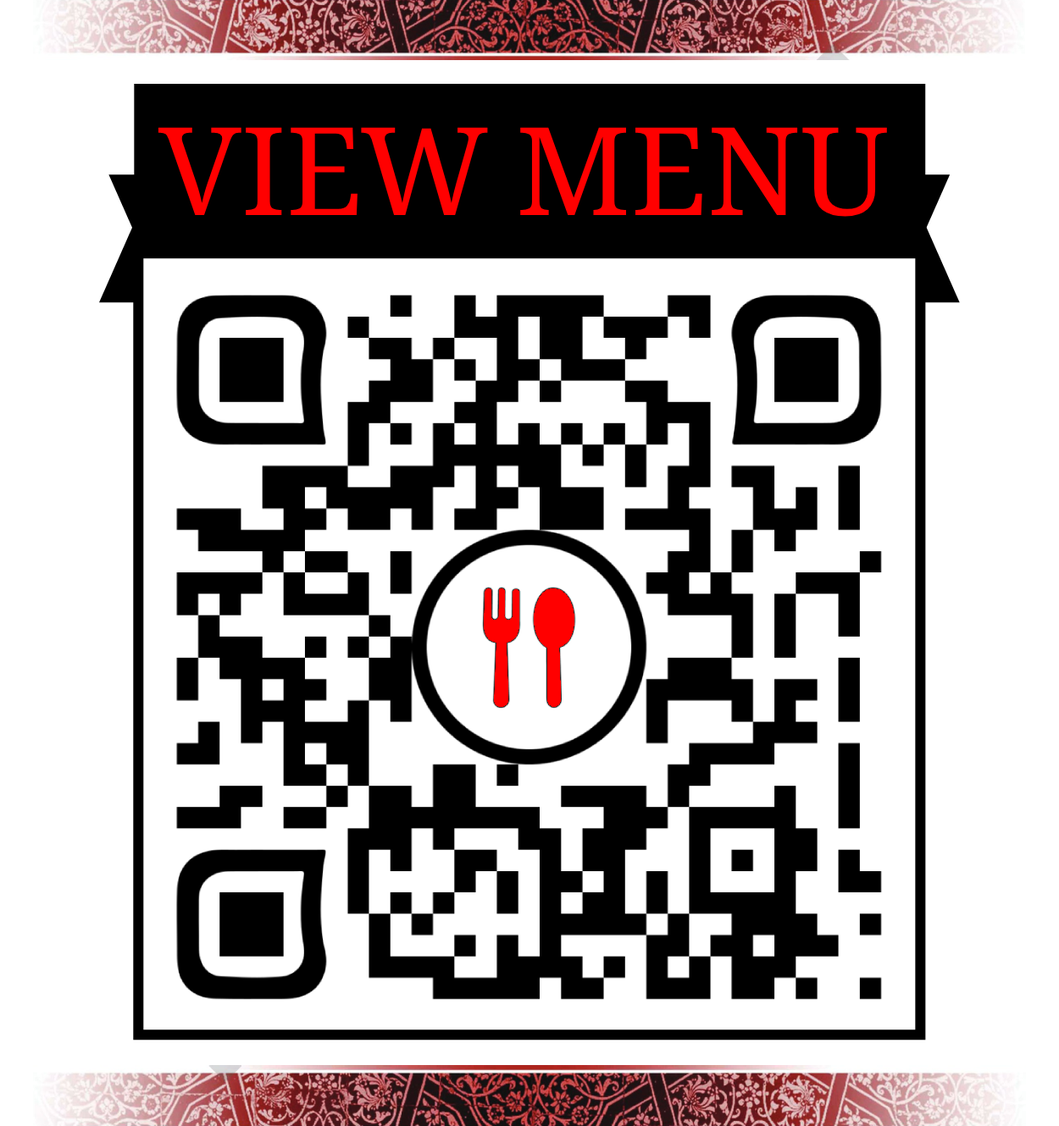
<style>
.page{position:relative;width:1059px;height:1126px;background:#ffffff}
.page>*{position:absolute;margin:0}
.t1{font:122.6px "NotoNaskhArabic-Regular";color:#ff0000}
</style>
<div class="page">
<p class="t1" style="left:158px;top:127px;width:729px;height:90px">VIEW MENU</p>
</div>
